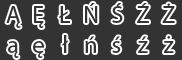
<style>
.page{position:relative;width:182px;height:60px;background:#333333}
.page>*{position:absolute;margin:0}
.t1{font:24px "MyriadPro-Regular";color:#333333}
.t2{font:24px "FrutigerLTStd-Roman";color:#333333}
</style>
<div class="page">
<p class="t1" style="left:6px;top:6px;width:15px;height:22px">Ą</p>
<p class="t1" style="left:34px;top:6px;width:10px;height:22px">Ę</p>
<p class="t2" style="left:59px;top:6px;width:11px;height:17px">Ł</p>
<p class="t1" style="left:85px;top:3px;width:13px;height:20px">Ń</p>
<p class="t1" style="left:112px;top:3px;width:11px;height:20px">Ś</p>
<p class="t1" style="left:137px;top:3px;width:12px;height:20px">Ź</p>
<p class="t1" style="left:162px;top:3px;width:13px;height:20px">Ż</p>
<p class="t1" style="left:8px;top:41px;width:11px;height:17px">ą</p>
<p class="t1" style="left:33px;top:41px;width:11px;height:17px">ę</p>
<p class="t2" style="left:62px;top:35px;width:6px;height:18px">ł</p>
<p class="t1" style="left:85px;top:36px;width:11px;height:17px">ń</p>
<p class="t1" style="left:112px;top:36px;width:9px;height:17px">ś</p>
<p class="t1" style="left:138px;top:36px;width:10px;height:17px">ź</p>
<p class="t1" style="left:163px;top:36px;width:11px;height:17px">ż</p>
</div>
